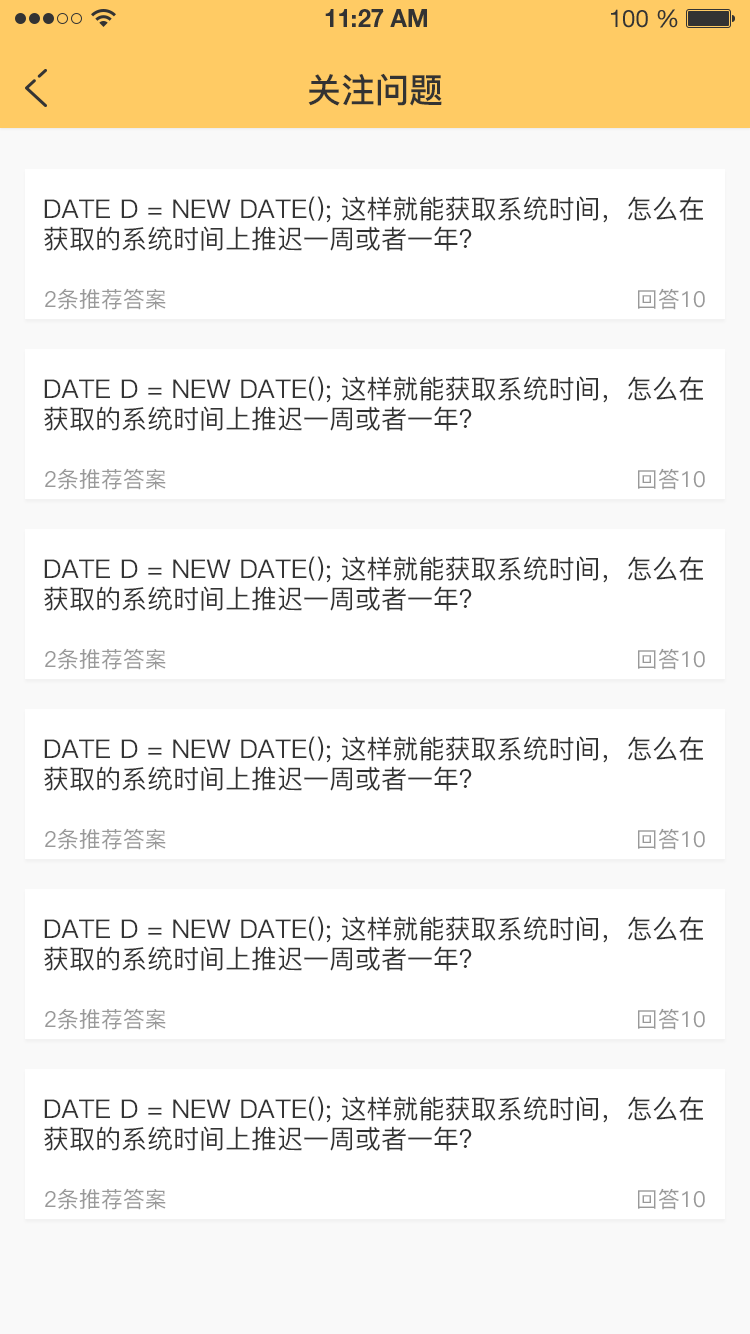
<style>
.page{position:relative;width:750px;height:1334px;background:#ffffff}
.page>*{position:absolute;margin:0}
.t1{font:34px "PingFang-SC-Bold";color:#333333;text-transform:uppercase}
.t2{font:26px/30px "PingFang-SC-Medium";color:#333333;text-transform:uppercase}
.t3{font:22px "PingFang-SC-Medium";color:#999999;text-transform:uppercase}
</style>
<div class="page">
<p class="t1" style="left:308px;top:73px;width:134px;height:33px">关注问题</p>
<p class="t2" style="left:44px;top:196px;width:659px;height:55px">Date d = new Date(); 这样就能获取系统时间，怎么在<br>获取的系统时间上推迟一周或者一年？</p>
<p class="t3" style="left:45px;top:288px;width:121px;height:22px">2条推荐答案</p>
<p class="t3" style="left:638px;top:288px;width:67px;height:22px">回答10</p>
<p class="t2" style="left:44px;top:376px;width:659px;height:55px">Date d = new Date(); 这样就能获取系统时间，怎么在<br>获取的系统时间上推迟一周或者一年？</p>
<p class="t3" style="left:45px;top:468px;width:121px;height:22px">2条推荐答案</p>
<p class="t3" style="left:638px;top:468px;width:67px;height:22px">回答10</p>
<p class="t2" style="left:44px;top:556px;width:659px;height:55px">Date d = new Date(); 这样就能获取系统时间，怎么在<br>获取的系统时间上推迟一周或者一年？</p>
<p class="t3" style="left:45px;top:648px;width:121px;height:22px">2条推荐答案</p>
<p class="t3" style="left:638px;top:648px;width:67px;height:22px">回答10</p>
<p class="t2" style="left:44px;top:736px;width:659px;height:55px">Date d = new Date(); 这样就能获取系统时间，怎么在<br>获取的系统时间上推迟一周或者一年？</p>
<p class="t3" style="left:45px;top:828px;width:121px;height:22px">2条推荐答案</p>
<p class="t3" style="left:638px;top:828px;width:67px;height:22px">回答10</p>
<p class="t2" style="left:44px;top:916px;width:659px;height:55px">Date d = new Date(); 这样就能获取系统时间，怎么在<br>获取的系统时间上推迟一周或者一年？</p>
<p class="t3" style="left:45px;top:1008px;width:121px;height:22px">2条推荐答案</p>
<p class="t3" style="left:638px;top:1008px;width:67px;height:22px">回答10</p>
<p class="t2" style="left:44px;top:1096px;width:659px;height:55px">Date d = new Date(); 这样就能获取系统时间，怎么在<br>获取的系统时间上推迟一周或者一年？</p>
<p class="t3" style="left:45px;top:1188px;width:121px;height:22px">2条推荐答案</p>
<p class="t3" style="left:638px;top:1188px;width:67px;height:22px">回答10</p>
</div>
